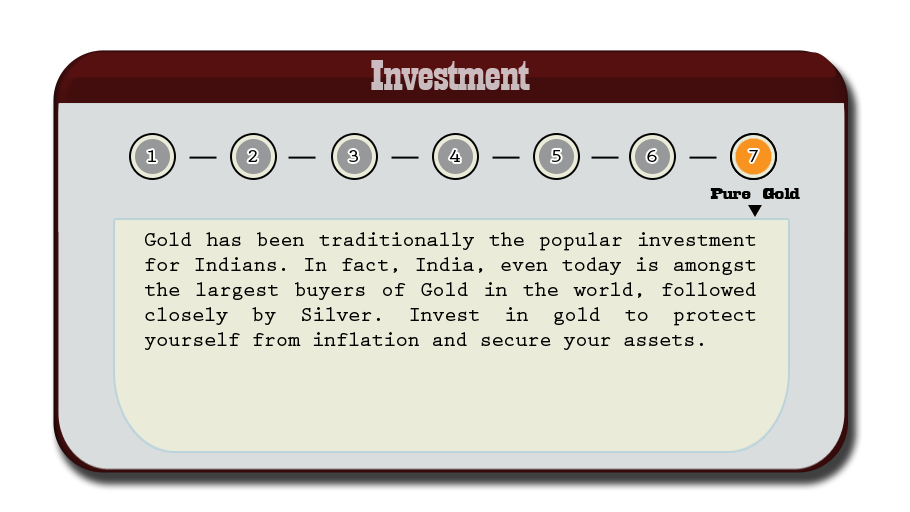
<style>
.page{position:relative;width:910px;height:512px;background:#eaebd8}
.page>*{position:absolute;margin:0}
.t1{font:44.6px "Playbill";letter-spacing:-0.025em;color:#c8bbbe;scale:1.61 1}
.t2{font:18.8px "PrestigeEliteStd-Bd";letter-spacing:-0.025em;color:#020201;scale:1.18 1}
.t3{font:17.3px "Playbill";letter-spacing:-0.025em;color:#020201;scale:2.47 1}
.t4{font:20.8px "PrestigeEliteStd-Bd";letter-spacing:-0.025em;color:#020201}
</style>
<div class="page">
<p class="t1" style="left:371px;top:60px;width:159px;height:30px">Investment</p>
<p class="t2" style="left:148px;top:150px;width:8px;height:12px">1</p>
<p class="t2" style="left:248px;top:150px;width:10px;height:12px">2</p>
<p class="t2" style="left:349px;top:150px;width:9px;height:12px">3</p>
<p class="t2" style="left:449px;top:149px;width:11px;height:13px">4</p>
<p class="t2" style="left:551px;top:150px;width:10px;height:12px">5</p>
<p class="t2" style="left:647px;top:150px;width:10px;height:12px">6</p>
<p class="t2" style="left:749px;top:150px;width:9px;height:12px">7</p>
<p class="t3" style="left:710px;top:188px;width:90px;height:11px">Pure Gold</p>
<p class="t4" style="left:145px;top:232px;width:611px;height:118px;text-align:justify">Gold has been traditionally the popular investment for Indians. In fact, India, even today is amongst the largest buyers of Gold in the world, followed closely by Silver. Invest in gold to protect yourself from inflation and secure your assets.</p>
</div>
